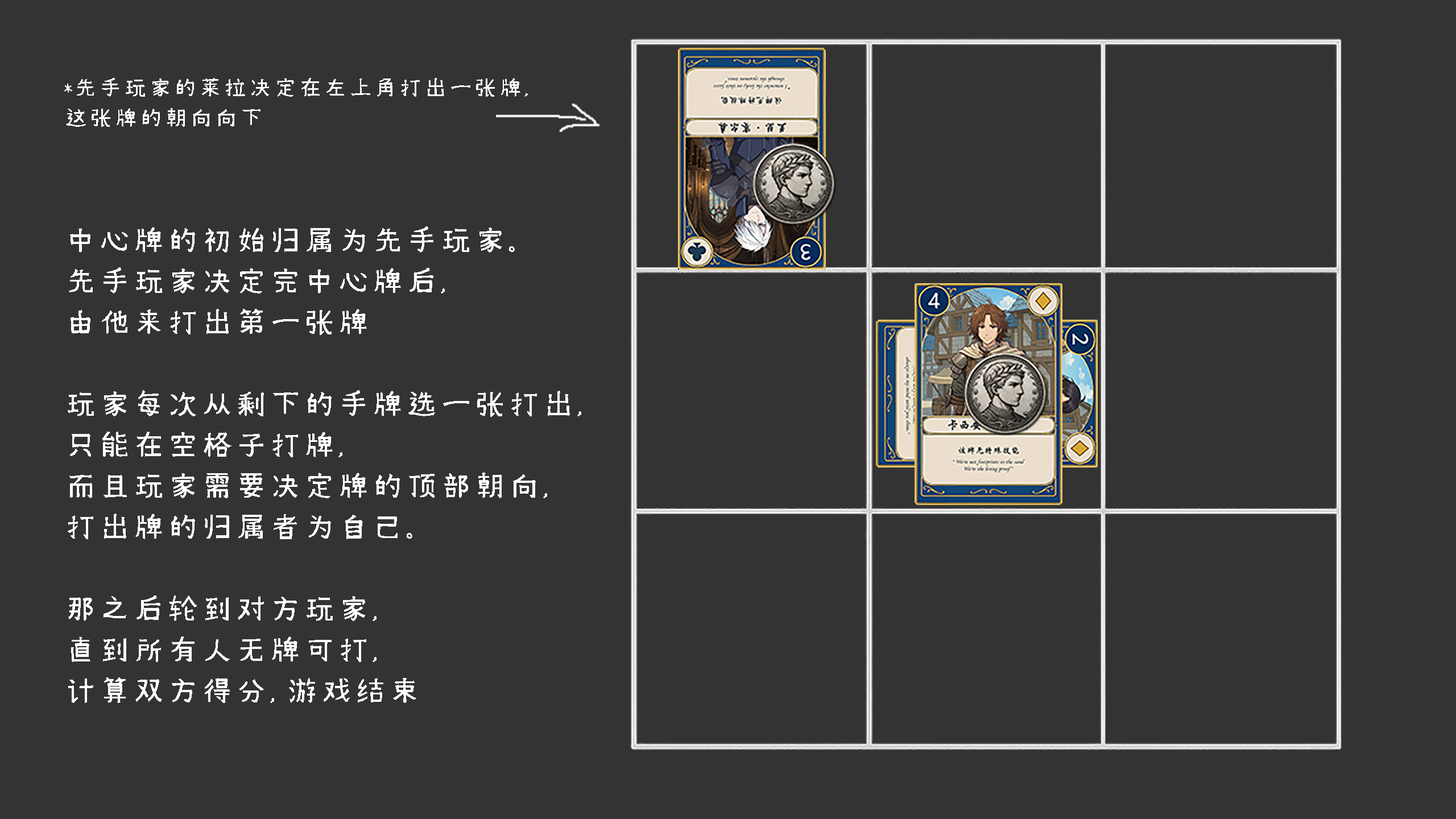
<style>
.page{position:relative;width:1456px;height:819px;background:#333333}
.page>*{position:absolute;margin:0}
.t1{font:25px "Xim-Sans-Brahmic";color:#ffffff}
.t2{font:34.1px "Xim-Sans-Brahmic";color:#ffffff}
</style>
<div class="page">
<p class="t1" style="left:64px;top:78px;width:464px;height:49px">*先手玩家的莱拉决定在左上角打出一张牌，<br>这张牌的朝向向下</p>
<p class="t2" style="left:68px;top:226px;width:513px;height:477px">中心牌的初始归属为先手玩家。<br>先手玩家决定完中心牌后，<br>由他来打出第一张牌<br><br>玩家每次从剩下的手牌选一张打出，<br>只能在空格子打牌，<br>而且玩家需要决定牌的顶部朝向，<br>打出牌的归属者为自己。<br><br>那之后轮到对方玩家，<br>直到所有人无牌可打，<br>计算双方得分，游戏结束</p>
</div>
